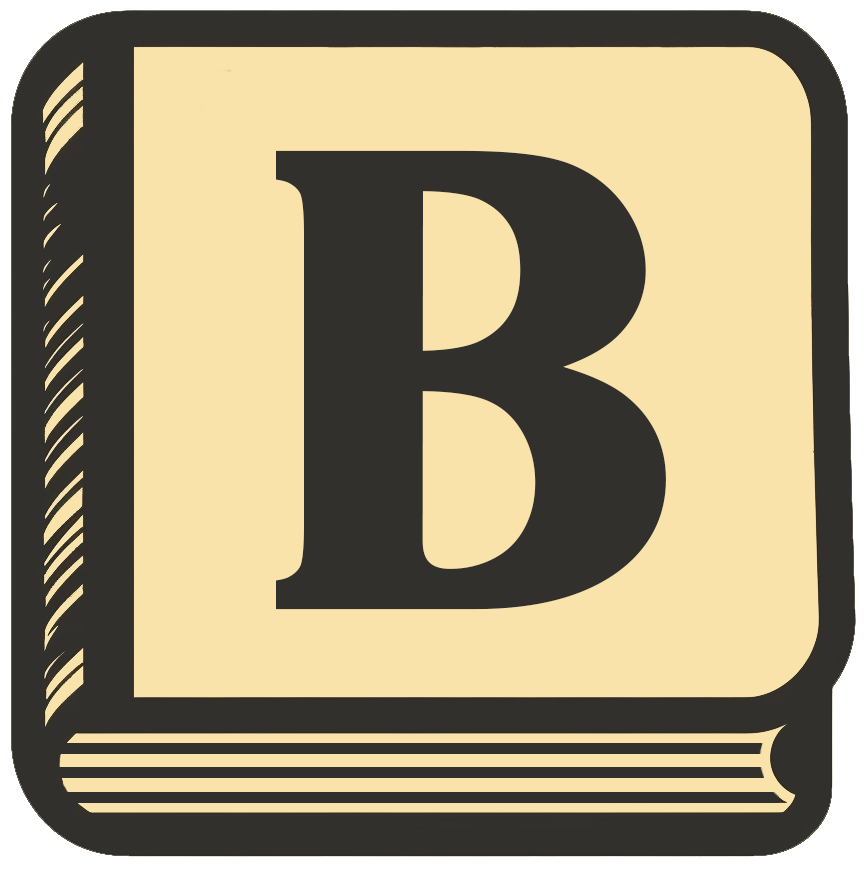
<style>
.page{position:relative;width:867px;height:871px;background:#f9e3ab}
.page>*{position:absolute;margin:0}
.t1{font:665.9px "TimesNewRomanPS-BoldMT";letter-spacing:0.15em;color:#31302c;font-weight:bold}
</style>
<div class="page">
<p class="t1" style="left:242px;top:150px;width:424px;height:460px">B</p>
</div>
